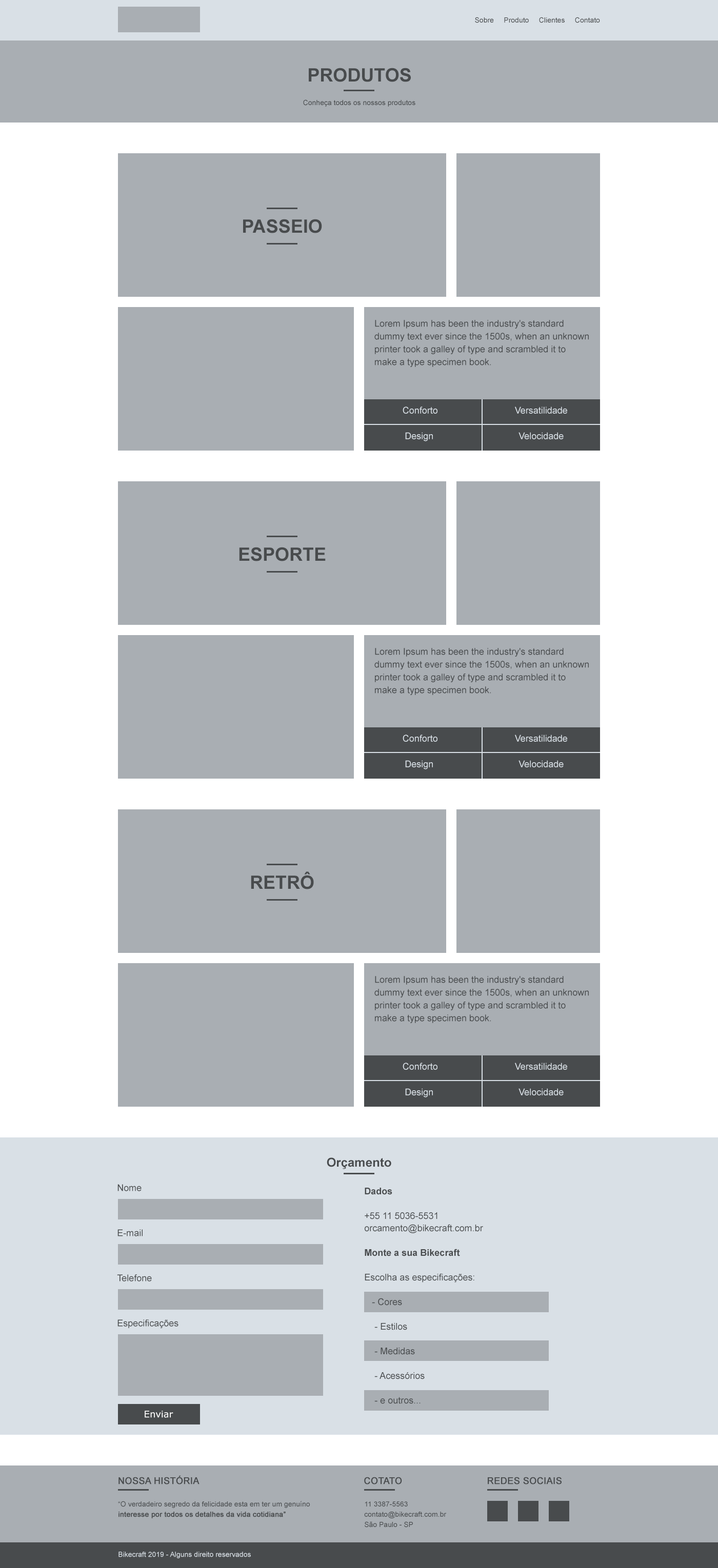
<style>
.page{position:relative;width:718px;height:1568px;background:#a9aeb3}
.page>*{position:absolute;margin:0}
.t1{font:7.2px "ArialMT";color:#484b4d}
.t2{font:18.5px "Arial-BoldMT";color:#484b4d;text-transform:uppercase}
.t3{font:9.2px/12.8px "ArialMT";color:#484b4d}
.t4{font:9.2px "ArialMT";color:#d9e0e6}
.t5{font:12.3px "Arial-BoldMT";color:#484b4d}
.t6{font:9.2px "ArialMT";color:#484b4d}
.t7{font:9.2px/12.3px "ArialMT";color:#484b4d}
.t8{font:9.2px/12.3px "Arial-BoldMT";color:#484b4d}
.t9{font:9.2px "Verdana";color:#ffffff}
.t10{font:9.2px "ArialMT";color:#484b4d;text-transform:uppercase;font-weight:bold}
.t11{font:7.2px/10.3px "ArialMT";color:#484b4d}
.t12{font:7.2px/10.3px "ArialMT";color:#484b4d;text-transform:uppercase}
.t13{font:7.2px/10.3px "ArialMT";color:#484b4d;font-weight:bold}
.t14{font:7.2px "ArialMT";color:#d9e0e6}
</style>
<div class="page">
<p class="t1" style="left:475px;top:17px;width:125px;height:6px">Sobre     Produto     Clientes     Contato</p>
<p class="t2" style="left:309px;top:68px;width:102px;height:14px">produtos</p>
<p class="t1" style="left:303px;top:99px;width:112px;height:8px">Conheça todos os nossos produtos</p>
<p class="t2" style="left:243px;top:219px;width:79px;height:14px">passeio</p>
<p class="t3" style="left:374px;top:320px;width:214px;height:47px">Lorem Ipsum has been the industry's standard dummy text ever since the 1500s, when an unknown printer took a galley of type and scrambled it to make a type specimen book.</p>
<p class="t4" style="left:402px;top:406px;width:35px;height:8px">Conforto</p>
<p class="t4" style="left:515px;top:406px;width:52px;height:8px">Versatilidade</p>
<p class="t4" style="left:405px;top:432px;width:28px;height:9px">Design</p>
<p class="t4" style="left:518px;top:432px;width:45px;height:7px">Velocidade</p>
<p class="t2" style="left:239px;top:547px;width:86px;height:14px">esporte</p>
<p class="t3" style="left:374px;top:648px;width:214px;height:47px">Lorem Ipsum has been the industry's standard dummy text ever since the 1500s, when an unknown printer took a galley of type and scrambled it to make a type specimen book.</p>
<p class="t4" style="left:402px;top:735px;width:35px;height:7px">Conforto</p>
<p class="t4" style="left:515px;top:735px;width:52px;height:7px">Versatilidade</p>
<p class="t4" style="left:405px;top:760px;width:28px;height:9px">Design</p>
<p class="t4" style="left:518px;top:760px;width:45px;height:7px">Velocidade</p>
<p class="t2" style="left:251px;top:871px;width:63px;height:18px">retrô</p>
<p class="t3" style="left:374px;top:976px;width:214px;height:47px">Lorem Ipsum has been the industry's standard dummy text ever since the 1500s, when an unknown printer took a galley of type and scrambled it to make a type specimen book.</p>
<p class="t4" style="left:402px;top:1063px;width:35px;height:7px">Conforto</p>
<p class="t4" style="left:515px;top:1063px;width:52px;height:7px">Versatilidade</p>
<p class="t4" style="left:405px;top:1088px;width:28px;height:9px">Design</p>
<p class="t4" style="left:518px;top:1088px;width:45px;height:7px">Velocidade</p>
<p class="t5" style="left:327px;top:1157px;width:64px;height:12px">Orçamento</p>
<p class="t6" style="left:117px;top:1184px;width:24px;height:7px">Nome</p>
<p class="t7" style="left:364px;top:1188px;width:119px;height:216px"><span class="t8">Dados<br><br></span>+55 11 5036-5531<br>orcamento@bikecraft.com.br<br><br><span class="t8">Monte a sua Bikecraft<br><br></span>Escolha as especificações:<br><br>   - Cores<br><br>    - Estilos<br><br>    - Medidas<br><br>    - Acessórios<br><br>    - e outros...</p>
<p class="t6" style="left:117px;top:1229px;width:25px;height:7px">E-mail</p>
<p class="t6" style="left:117px;top:1274px;width:35px;height:7px">Telefone</p>
<p class="t6" style="left:117px;top:1319px;width:61px;height:9px">Especificações</p>
<p class="t9" style="left:145px;top:1411px;width:28px;height:7px">Enviar</p>
<p class="t10" style="left:118px;top:1475px;width:81px;height:9px">Nossa história</p>
<p class="t10" style="left:364px;top:1477px;width:38px;height:7px">cotato</p>
<p class="t10" style="left:487px;top:1477px;width:74px;height:7px">redes sociais</p>
<p class="t11" style="left:118px;top:1501px;width:192px;height:17px"><span class="t12">“O </span>verdadeiro segredo da felicidade esta em ter um genuíno <span class="t13">interesse por todos os detalhes da vida cotidiana”</span></p>
<p class="t11" style="left:364px;top:1501px;width:82px;height:27px"><span class="t12">11 3387-5563<br></span>contato@bikecraft.com.br<br>São Paulo - SP</p>
<p class="t14" style="left:118px;top:1552px;width:133px;height:6px">Bikecraft 2019 - Alguns direito reservados</p>
</div>
